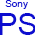
<style>
.page{position:relative;width:35px;height:35px;background:#ffffff}
.page>*{position:absolute;margin:0}
.t1{font:10px "ArialMT";color:#0c0ccf}
.t2{font:30px "ArialMT";color:#0c0ccf}
</style>
<div class="page">
<p class="t1" style="left:5px;top:0px;width:23px;height:9px">Sony</p>
<p class="t2" style="left:0px;top:13px;width:36px;height:22px">PS</p>
</div>
